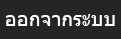
<style>
.page{position:relative;width:121px;height:39px;background:#252525}
.page>*{position:absolute;margin:0}
.t1{font:20px "Tahoma";color:#ffffff}
</style>
<div class="page">
<p class="t1" style="left:6px;top:14px;width:109px;height:12px">ออกจากระบบ</p>
</div>
